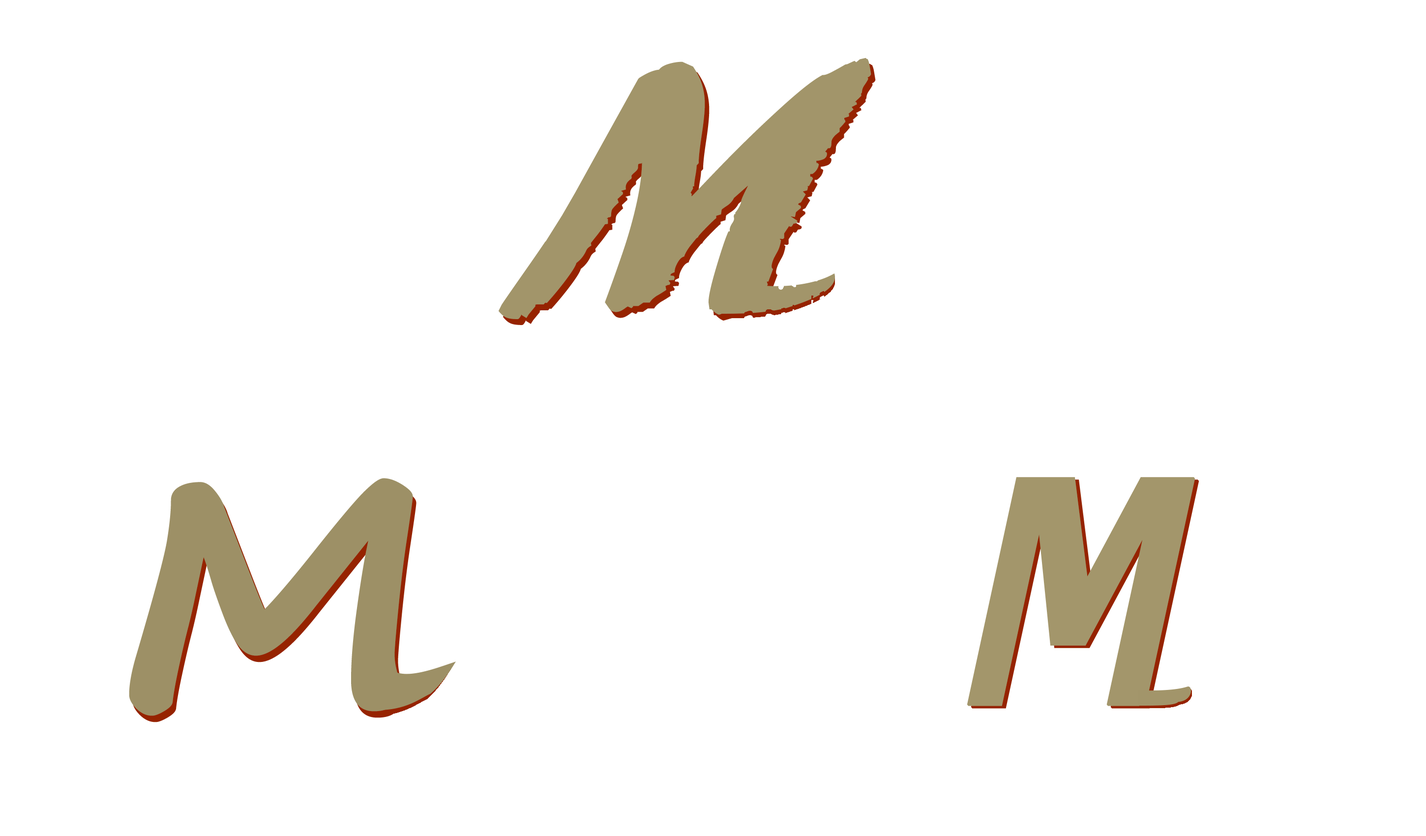
<style>
.page{position:relative;width:1426px;height:836px;background:#ffffff}
.page>*{position:absolute;margin:0}
.t1{font:376px "ARBLANCA";letter-spacing:0.05em;color:#a2956a;text-transform:uppercase;font-weight:bold;scale:1.08 1}
.t2{font:376px "YanoneKaffeesatz-Bold";letter-spacing:0.05em;color:#a2956a;text-transform:uppercase;font-weight:bold;scale:1.08 1}
.t3{font:313.6px "SegoePrint-Bold";letter-spacing:0.05em;color:#9d9066;text-transform:uppercase;font-weight:bold;scale:1.08 1}
.t4{font:313.1px "LucidaSans-TypewriterBoldOblique";letter-spacing:0.05em;color:#a2956a;text-transform:uppercase;font-weight:bold;scale:1.08 1}
.t5{font:313.1px "LucidaSans-TypewriterBoldOblique";letter-spacing:0.05em;color:#a3966b;text-transform:uppercase;font-weight:bold;scale:1.08 1}
</style>
<div class="page">
<p class="t1" style="left:499px;top:58px;width:372px;height:261px"><span class="t2"><br></span>M</p>
<p class="t1" style="left:503px;top:63px;width:373px;height:262px"><span class="t2"><br></span>M</p>
<p class="t3" style="left:129px;top:478px;width:284px;height:238px">M</p>
<p class="t3" style="left:132px;top:484px;width:285px;height:238px">M</p>
<p class="t4" style="left:967px;top:477px;width:229px;height:229px">M</p>
<p class="t5" style="left:971px;top:480px;width:229px;height:229px">M</p>
</div>
